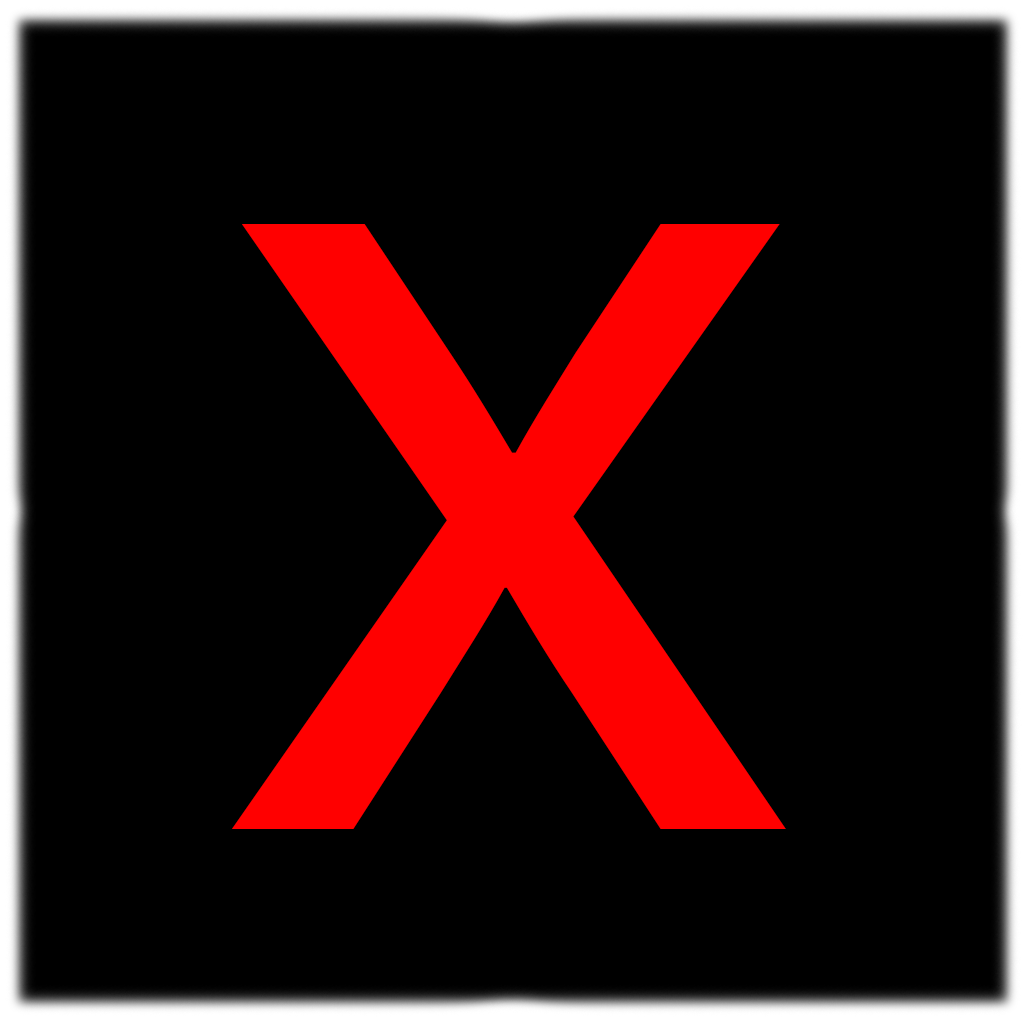
<style>
.page{position:relative;width:1024px;height:1024px;background:#000000}
.page>*{position:absolute;margin:0}
.t1{font:1250px "MyriadPro-Regular";color:#ff0000}
</style>
<div class="page">
<p class="t1" style="left:232px;top:224px;width:554px;height:605px">x</p>
</div>
